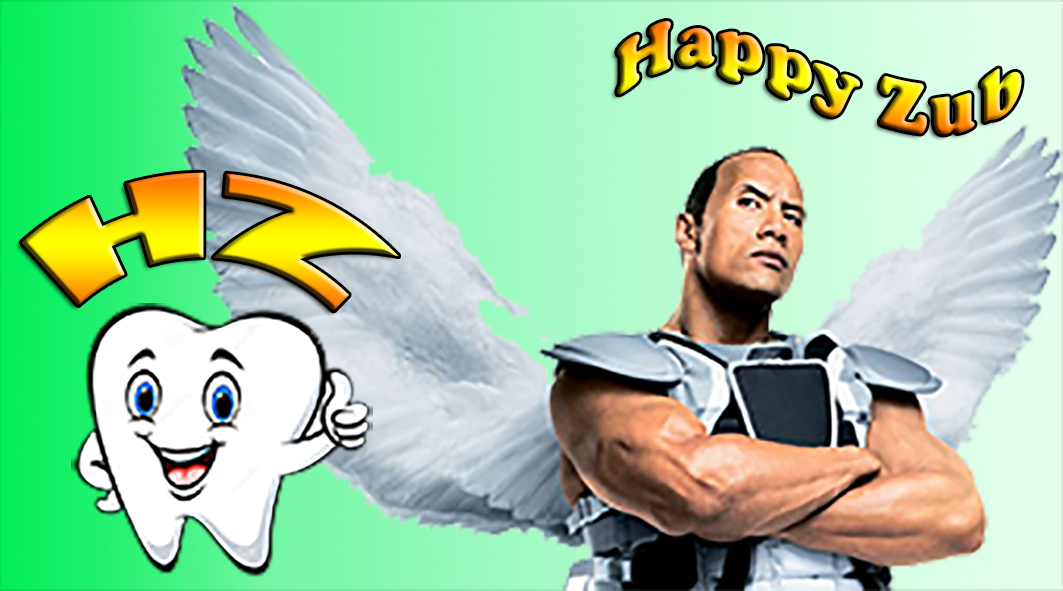
<style>
.page{position:relative;width:1063px;height:591px}
.page>*{position:absolute;margin:0}
.t1{font:75px "CooperBlack";letter-spacing:-0.01em}
.t2{font:112.6px "GillSans-UltraBold";letter-spacing:-0.01em}
</style>
<div class="page">
<p class="t1" style="left:617px;top:21px;width:405px;height:114px">Happy Zub</p>
<p class="t2" style="left:21px;top:172px;width:378px;height:139px">HZ</p>
</div>
